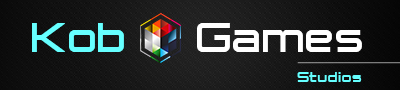
<style>
.page{position:relative;width:400px;height:90px}
.page>*{position:absolute;margin:0}
.t1{font:70.3px "ISL_Jupiter";color:#66ffff}
.t2{font:70.3px "ISL_Jupiter";color:#ffffff}
.t3{font:23.4px "ISL_Jupiter";letter-spacing:0.025em;color:#66ffff}
</style>
<div class="page">
<p class="t1" style="left:32px;top:23px;width:92px;height:29px">Kob</p>
<p class="t2" style="left:197px;top:23px;width:165px;height:29px">Games</p>
<p class="t3" style="left:297px;top:72px;width:65px;height:10px">Studios</p>
</div>
